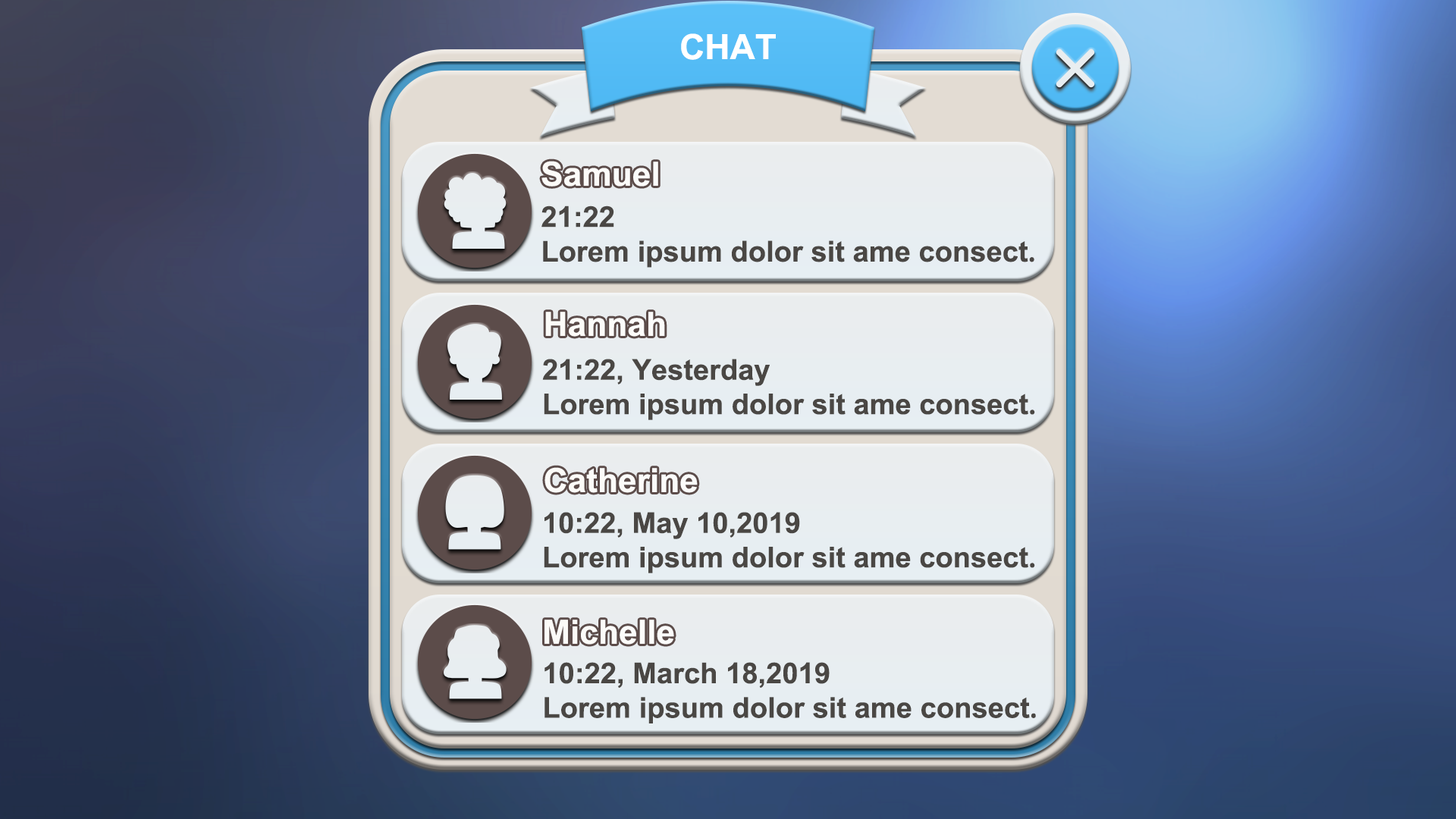
<style>
.page{position:relative;width:1456px;height:819px}
.page>*{position:absolute;margin:0}
.t1{font:34.9px "Arial-BoldMT";color:#ffffff}
.t2{font:33.5px "Arial-BoldMT";color:#ffffff}
.t3{font:28.8px "Arial-BoldMT";color:#4a4744}
.t4{font:28.8px "AdobeHeitiStd-Regular";color:#4a4744}
.t5{font:33.3px "Arial-BoldMT";color:#ffffff}
.t6{font:28.7px "Arial-BoldMT";color:#4a4744}
.t7{font:28.7px "AdobeHeitiStd-Regular";color:#4a4744}
.t8{font:33.4px "Arial-BoldMT";color:#ffffff}
</style>
<div class="page">
<p class="t1" style="left:681px;top:33px;width:95px;height:27px">CHAT</p>
<p class="t2" style="left:541px;top:161px;width:117px;height:26px">Samuel</p>
<p class="t3" style="left:541px;top:206px;width:493px;height:62px">21:22  <br>Lorem ipsum dolor sit ame consect<span class="t4">.</span></p>
<p class="t5" style="left:545px;top:312px;width:120px;height:25px">Hannah</p>
<p class="t6" style="left:542px;top:359px;width:493px;height:61px">21:22, Yesterday  <br>Lorem ipsum dolor sit ame consect<span class="t7">.</span></p>
<p class="t5" style="left:544px;top:467px;width:154px;height:26px">Catherine</p>
<p class="t6" style="left:544px;top:512px;width:491px;height:61px">10:22, May 10,2019<br>Lorem ipsum dolor sit ame consect<span class="t7">.</span></p>
<p class="t8" style="left:544px;top:620px;width:130px;height:25px">Michelle</p>
<p class="t6" style="left:544px;top:662px;width:492px;height:61px">10:22, March 18,2019  <br>Lorem ipsum dolor sit ame consect<span class="t7">.</span></p>
</div>
